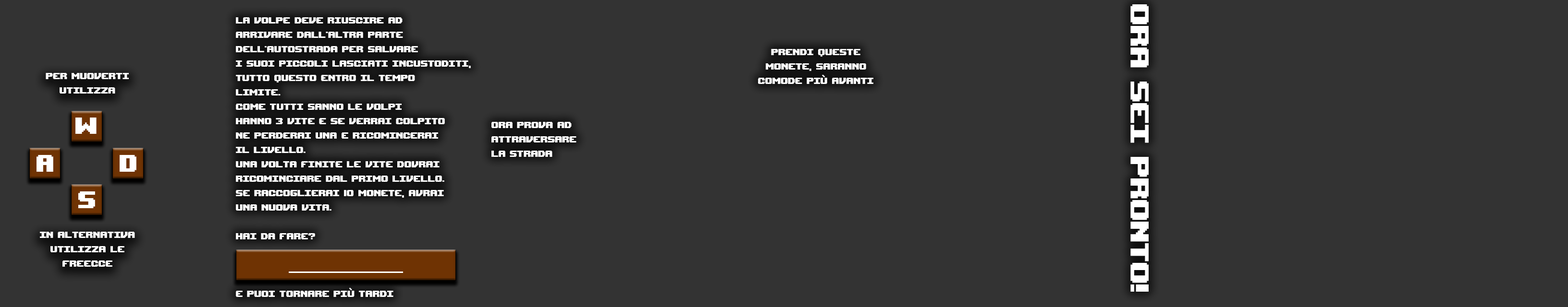
<style>
.page{position:relative;width:1568px;height:307px;background:#333333}
.page>*{position:absolute;margin:0}
.t1{font:36px "UpheavalTT-BRK-";color:#ffffff}
.t2{font:12px "UpheavalTT-BRK-";color:#ffffff}
.t3{font:32px "UpheavalTT-BRK-";color:#ffffff}
.t4{font:20px "8BITWONDERNominal";color:#ffffff}
</style>
<div class="page">
<p class="t1" style="left:1130px;top:4px;width:19px;height:288px;rotate:90deg">Ora sei pronto!</p>
<p class="t2" style="left:236px;top:17px;width:235px;height:280px">La volpe deve riuscire ad<br>arrivare dall'altra parte<br>dell'autostrada per salvare<br>i suoi piccoli lasciati incustoditi,<br>tutto questo entro il tempo<br>limite.<br>Come tutti sanno le volpi<br>hanno 3 vite e se verrai colpito<br>ne perderai una e ricomincerai<br>il livello.<br>Una volta finite le vite dovrai<br>ricominciare dal primo livello.<br>Se raccoglierai 10 monete, avrai<br>una nuova vita.<br><br>Hai da fare?<br><br><br><br>E puoi tornare più tardi</p>
<p class="t2" style="left:758px;top:49px;width:115px;height:35px;text-align:center">Prendi queste<br>monete, saranno<br>comode più avanti</p>
<p class="t2" style="left:46px;top:73px;width:83px;height:21px;text-align:center">Per muoverti<br>utilizza</p>
<p class="t3" style="left:75px;top:118px;width:22px;height:16px">W</p>
<p class="t2" style="left:491px;top:122px;width:85px;height:35px">Ora prova ad<br>attraversare<br>la strada</p>
<p class="t4" style="left:37px;top:155px;width:16px;height:17px">A</p>
<p class="t4" style="left:120px;top:155px;width:16px;height:17px">D</p>
<p class="t4" style="left:78px;top:192px;width:17px;height:16px">S</p>
<p class="t2" style="left:40px;top:232px;width:95px;height:35px;text-align:center">in alternativa<br>utilizza le<br>freecce</p>
</div>
